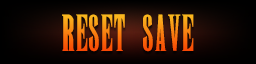
<style>
.page{position:relative;width:256px;height:64px}
.page>*{position:absolute;margin:0}
.t1{font:37.9px "New";text-transform:uppercase}
</style>
<div class="page">
<p class="t1" style="left:62px;top:14px;width:132px;height:38px">RESET SAVE</p>
</div>
